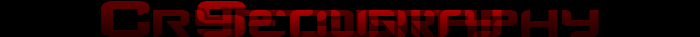
<style>
.page{position:relative;width:700px;height:37px;background:#000000}
.page>*{position:absolute;margin:0}
.t1{font:72px "Counter-StrikeRegular"}
</style>
<div class="page">
<p class="t1" style="left:101px;top:1px;width:498px;height:36px">Cryptography</p>
<p class="t1" style="left:197px;top:1px;width:305px;height:36px">Security</p>
</div>
